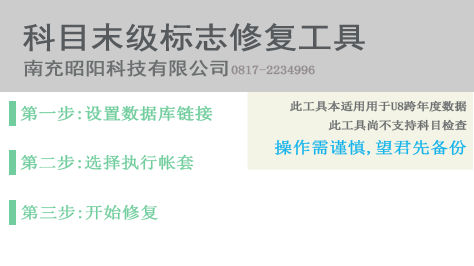
<style>
.page{position:relative;width:474px;height:266px;background:#ffffff}
.page>*{position:absolute;margin:0}
.t1{font:30px "SimHei";color:#575a5d;font-weight:bold;scale:1.13 1}
.t2{font:18px "SimHei";color:#6c6f70;font-weight:bold;scale:1.13 1}
.t3{font:12px "NSimSun";color:#938d90;font-weight:bold;scale:1.13 1}
.t4{font:11px "NSimSun";color:#6c6f70;font-weight:bold;scale:1.13 1}
.t5{font:16px "NSimSun";color:#14b3ec;font-weight:bold;scale:1.13 1}
.t6{font:16px "NSimSun";color:#71cd9d;font-weight:bold;scale:1.13 1}
</style>
<div class="page">
<p class="t1" style="left:23px;top:23px;width:342px;height:29px">科目末级标志修复工具</p>
<p class="t2" style="left:24px;top:59px;width:204px;height:18px">南充昭阳科技有限公司</p>
<p class="t3" style="left:231px;top:65px;width:84px;height:10px">0817-2234996</p>
<p class="t4" style="left:274px;top:100px;width:193px;height:56px;text-align:right">此工具本适用用于U8跨年度数据<br>此工具尚不支持科目检查<br><span class="t5">操作需谨慎,望君先备份</span></p>
<p class="t6" style="left:20px;top:105px;width:193px;height:16px">第一步:设置数据库链接</p>
<p class="t6" style="left:20px;top:154px;width:174px;height:16px">第二步:选择执行帐套</p>
<p class="t6" style="left:21px;top:204px;width:137px;height:16px">第三步:开始修复</p>
</div>
